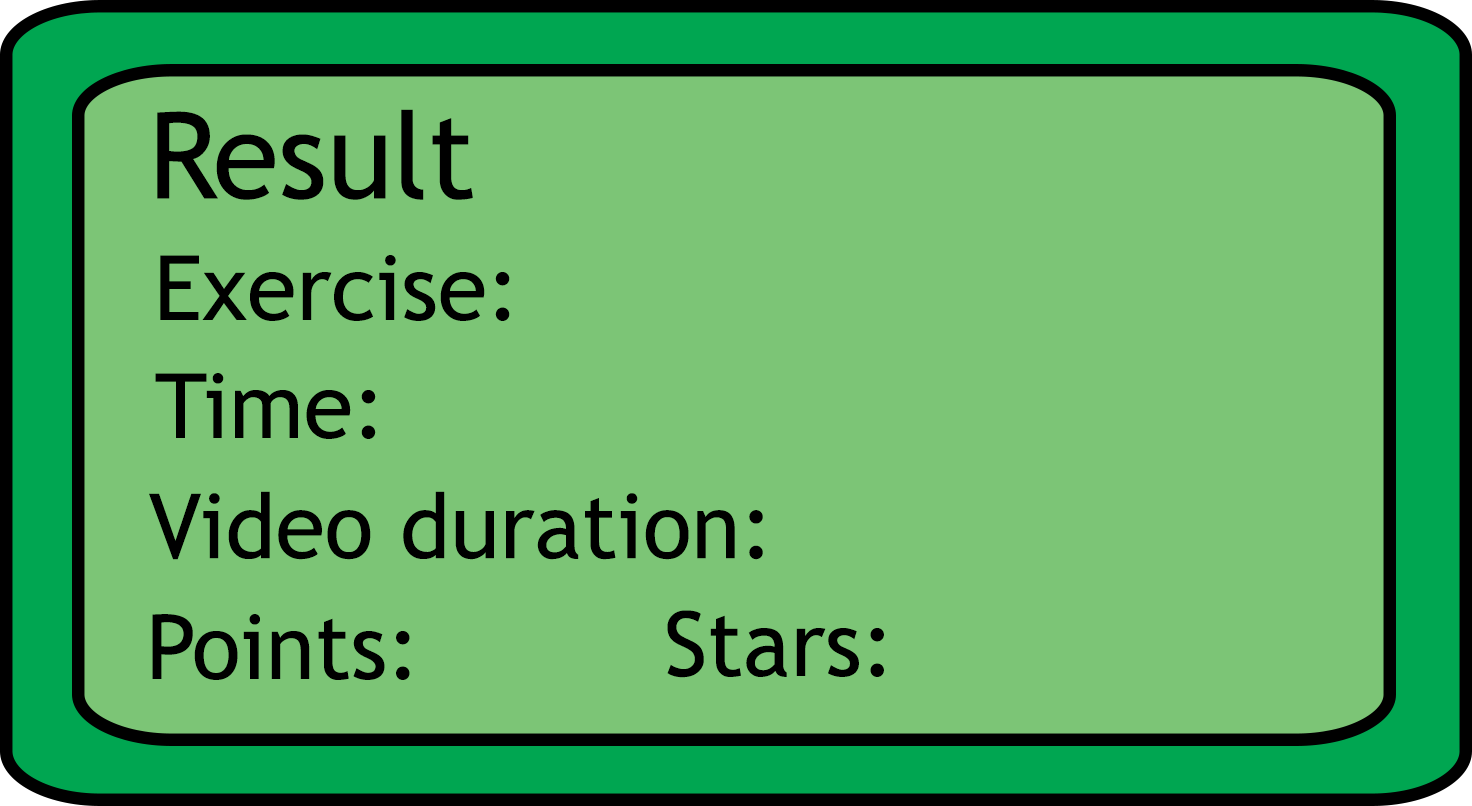
<style>
.page{position:relative;width:1472px;height:806px;background:#7cc576}
.page>*{position:absolute;margin:0}
.t1{font:120px "TrebuchetMS";color:#000000}
.t2{font:90px "TrebuchetMS";color:#000000}
</style>
<div class="page">
<p class="t1" style="left:157px;top:109px;width:316px;height:91px">Result</p>
<p class="t2" style="left:160px;top:255px;width:350px;height:66px">Exercise:</p>
<p class="t2" style="left:155px;top:373px;width:221px;height:66px">Time:</p>
<p class="t2" style="left:149px;top:491px;width:614px;height:69px">Video duration:</p>
<p class="t2" style="left:152px;top:614px;width:258px;height:66px">Points:</p>
<p class="t2" style="left:667px;top:610px;width:217px;height:68px">Stars:</p>
</div>
